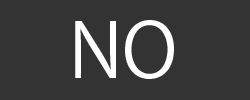
<style>
.page{position:relative;width:250px;height:100px;background:#333333}
.page>*{position:absolute;margin:0}
.t1{font:75px "KozGoPr6N-Regular";color:#ffffff}
</style>
<div class="page">
<p class="t1" style="left:75px;top:20px;width:99px;height:59px">NO</p>
</div>
